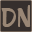
<style>
.page{position:relative;width:32px;height:32px;background:#362f2d}
.page>*{position:absolute;margin:0}
.t1{font:29.2px "KTF-Roadstar";color:#998675}
</style>
<div class="page">
<p class="t1" style="left:1px;top:5px;width:30px;height:22px">DN</p>
</div>
